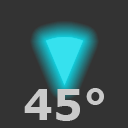
<style>
.page{position:relative;width:128px;height:128px;background:#333333}
.page>*{position:absolute;margin:0}
.t1{font:41.7px "Verdana-Bold";color:#cacaca}
</style>
<div class="page">
<p class="t1" style="left:24px;top:88px;width:80px;height:33px">45°</p>
</div>
